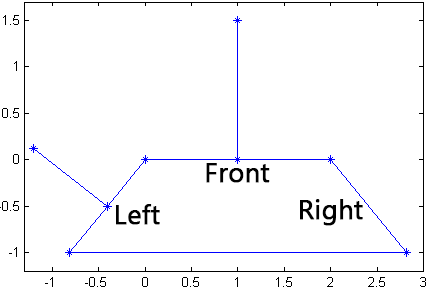
<style>
.page{position:relative;width:428px;height:290px;background:#ffffff}
.page>*{position:absolute;margin:0}
.t1{font:26.7px "MicrosoftTaiLe";color:#000000;font-weight:bold}
</style>
<div class="page">
<p class="t1" style="left:206px;top:163px;width:64px;height:20px">Front</p>
<p class="t1" style="left:116px;top:204px;width:44px;height:21px">Left</p>
<p class="t1" style="left:300px;top:199px;width:63px;height:27px">Right</p>
</div>
